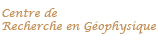
<style>
.page{position:relative;width:158px;height:40px;background:#ffffff}
.page>*{position:absolute;margin:0}
.t1{font:11.1px "LucidaCalligraphy-Italic";color:#c39058}
</style>
<div class="page">
<p class="t1" style="left:2px;top:8px;width:55px;height:9px">Centre de</p>
<p class="t1" style="left:2px;top:21px;width:154px;height:13px">Recherche en Géophysique</p>
</div>
